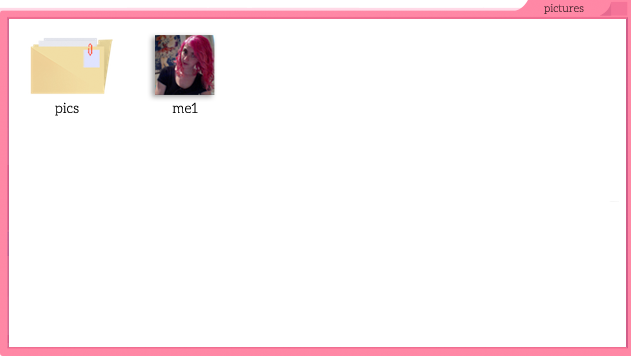
<style>
.page{position:relative;width:631px;height:356px;background:#ffffff}
.page>*{position:absolute;margin:0}
.t1{font:11px "Aleo-Light";color:#4a2730}
.t2{font:14px "Aleo-Light";color:#000000}
</style>
<div class="page">
<p class="t1" style="left:544px;top:4px;width:40px;height:10px">pictures</p>
<p class="t2" style="left:55px;top:102px;width:24px;height:14px">pics</p>
<p class="t2" style="left:172px;top:102px;width:26px;height:11px">me1</p>
</div>
